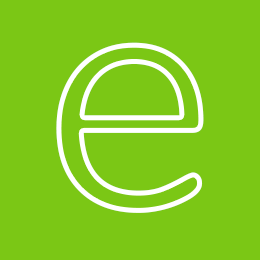
<style>
.page{position:relative;width:260px;height:260px;background:#7bc715}
.page>*{position:absolute;margin:0}
.t1{font:336.2px "Nunito-Regular"}
</style>
<div class="page">
<p class="t1" style="left:56px;top:42px;width:148px;height:171px">e</p>
</div>
